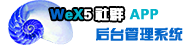
<style>
.page{position:relative;width:191px;height:45px;background:#ffffff}
.page>*{position:absolute;margin:0}
.t1{font:14px "FZZYJW--GB1-0";letter-spacing:0.02em;color:#04b4ca;font-weight:bold}
.t2{font:14px "FZZYJW--GB1-0";letter-spacing:0.02em;color:#0466ca;font-weight:bold}
.t3{font:14px "FZZYJW--GB1-0";letter-spacing:0.02em;color:#ffffff;font-weight:bold}
</style>
<div class="page">
<p class="t1" style="left:50px;top:9px;width:42px;height:11px"><span class="t2">W</span>eX<span class="t3">5</span></p>
<p class="t3" style="left:95px;top:8px;width:29px;height:13px">社群</p>
<p class="t1" style="left:129px;top:9px;width:30px;height:11px">APP</p>
<p class="t2" style="left:96px;top:27px;width:87px;height:14px">后台管理系统</p>
</div>
